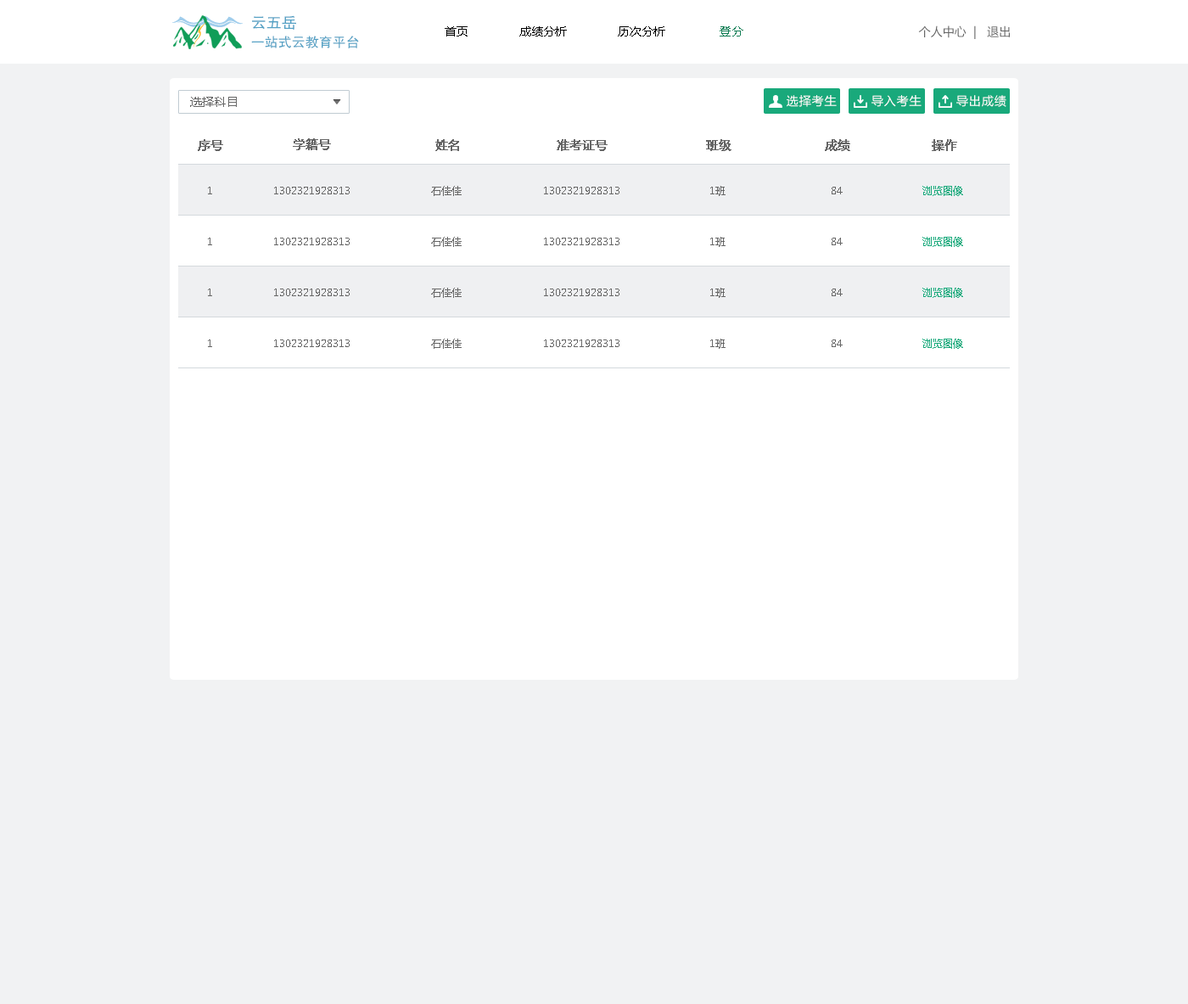
<style>
.page{position:relative;width:1188px;height:1004px;background:#f1f2f3}
.page>*{position:absolute;margin:0}
.t1{font:13.6px/20.4px "FZHTK--GBK1-0";color:#53a0c4}
.t2{font:15.3px/20.4px "FZHTK--GBK1-0";color:#53a0c4}
.t3{font:11.9px "MicrosoftYaHei";color:#000000;text-transform:uppercase}
.t4{font:11.9px "MicrosoftYaHei";color:#107d54;text-transform:uppercase}
.t5{font:11.9px "MicrosoftYaHei";color:#666666;text-transform:uppercase}
.t6{font:11.9px "MicrosoftYaHei";letter-spacing:0.02em;color:#666666}
.t7{font:11.9px "MicrosoftYaHei";letter-spacing:0.07em;color:#ffffff}
.t8{font:11.9px "MicrosoftYaHei";color:#666666;font-weight:bold}
.t9{font:10.2px "MicrosoftYaHei";color:#666666}
.t10{font:10.2px "MicrosoftYaHei";color:#19a97b}
</style>
<div class="page">
<p class="t1" style="left:251px;top:15px;width:108px;height:33px"><span class="t2">云五岳<br></span>一站式云教育平台</p>
<p class="t3" style="left:445px;top:26px;width:298px;height:10px">首页               成绩分析               历次分析                <span class="t4">登分</span></p>
<p class="t5" style="left:918px;top:25px;width:92px;height:14px">个人中心  |   退出</p>
<p class="t6" style="left:190px;top:97px;width:47px;height:10px">选择科目</p>
<p class="t7" style="left:787px;top:95px;width:50px;height:12px">选择考生</p>
<p class="t7" style="left:871px;top:95px;width:50px;height:12px">导入考生</p>
<p class="t7" style="left:956px;top:95px;width:50px;height:12px">导出成绩</p>
<p class="t8" style="left:198px;top:139px;width:25px;height:12px">序号</p>
<p class="t8" style="left:293px;top:138px;width:38px;height:12px">学籍号</p>
<p class="t8" style="left:435px;top:139px;width:24px;height:12px">姓名</p>
<p class="t8" style="left:557px;top:139px;width:51px;height:12px">准考证号</p>
<p class="t8" style="left:706px;top:139px;width:25px;height:12px">班级</p>
<p class="t8" style="left:825px;top:139px;width:25px;height:12px">成绩</p>
<p class="t8" style="left:932px;top:139px;width:25px;height:12px">操作</p>
<p class="t9" style="left:431px;top:186px;width:31px;height:10px">石佳佳</p>
<p class="t9" style="left:710px;top:186px;width:15px;height:10px">1班</p>
<p class="t10" style="left:922px;top:186px;width:41px;height:10px">浏览图像</p>
<p class="t9" style="left:208px;top:187px;width:4px;height:7px">1</p>
<p class="t9" style="left:274px;top:187px;width:76px;height:7px">1302321928313</p>
<p class="t9" style="left:544px;top:187px;width:75px;height:7px">1302321928313</p>
<p class="t9" style="left:832px;top:187px;width:11px;height:7px">84</p>
<p class="t9" style="left:208px;top:238px;width:4px;height:7px">1</p>
<p class="t9" style="left:274px;top:238px;width:76px;height:7px">1302321928313</p>
<p class="t9" style="left:431px;top:237px;width:31px;height:10px">石佳佳</p>
<p class="t9" style="left:544px;top:238px;width:75px;height:7px">1302321928313</p>
<p class="t9" style="left:710px;top:237px;width:15px;height:10px">1班</p>
<p class="t9" style="left:832px;top:238px;width:11px;height:7px">84</p>
<p class="t10" style="left:922px;top:237px;width:41px;height:10px">浏览图像</p>
<p class="t9" style="left:208px;top:288px;width:4px;height:8px">1</p>
<p class="t9" style="left:274px;top:288px;width:76px;height:8px">1302321928313</p>
<p class="t9" style="left:431px;top:288px;width:31px;height:10px">石佳佳</p>
<p class="t9" style="left:544px;top:288px;width:75px;height:8px">1302321928313</p>
<p class="t9" style="left:710px;top:288px;width:15px;height:10px">1班</p>
<p class="t9" style="left:832px;top:288px;width:11px;height:8px">84</p>
<p class="t10" style="left:922px;top:288px;width:41px;height:10px">浏览图像</p>
<p class="t9" style="left:208px;top:339px;width:4px;height:8px">1</p>
<p class="t9" style="left:274px;top:339px;width:76px;height:8px">1302321928313</p>
<p class="t9" style="left:431px;top:339px;width:31px;height:10px">石佳佳</p>
<p class="t9" style="left:544px;top:339px;width:75px;height:8px">1302321928313</p>
<p class="t9" style="left:710px;top:339px;width:15px;height:10px">1班</p>
<p class="t9" style="left:832px;top:339px;width:11px;height:8px">84</p>
<p class="t10" style="left:922px;top:339px;width:41px;height:10px">浏览图像</p>
</div>
